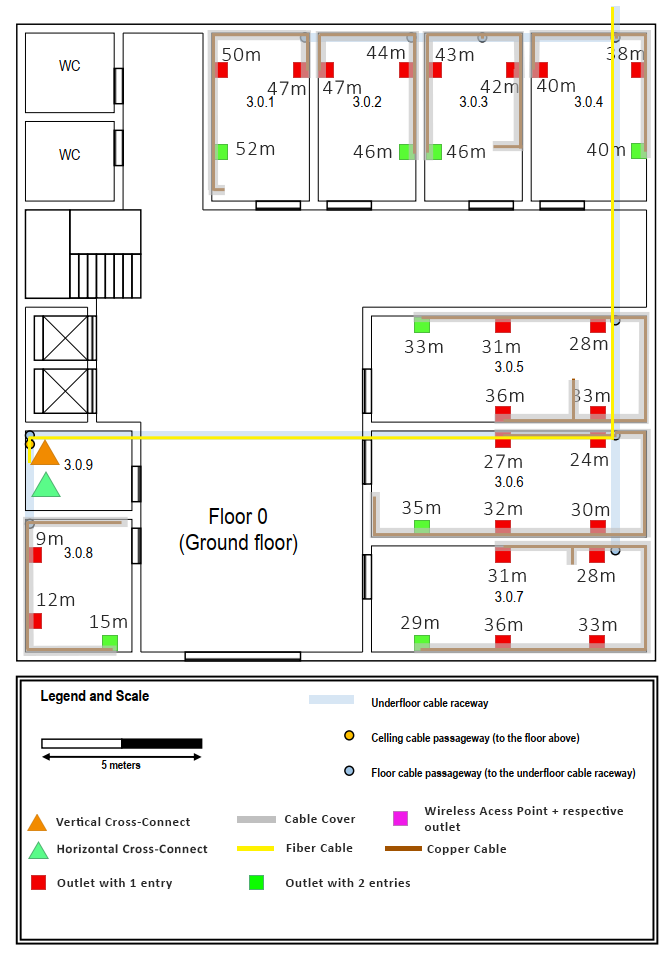
<style>
.page{position:relative;width:669px;height:956px;background:#ffffff}
.page>*{position:absolute;margin:0}
.t1{font:21.3px "Calibri-Light";letter-spacing:0.04em;color:#282828}
.t2{font:13.3px "Calibri-Bold";letter-spacing:0.04em;color:#282828}
.t3{font:13.1px "Calibri-Bold";letter-spacing:0.04em;color:#282828}
</style>
<div class="page">
<p class="t1" style="left:222px;top:48px;width:38px;height:13px">50m</p>
<p class="t1" style="left:366px;top:46px;width:39px;height:13px">44m</p>
<p class="t1" style="left:435px;top:48px;width:39px;height:13px">43m</p>
<p class="t1" style="left:606px;top:47px;width:39px;height:13px">38m</p>
<p class="t1" style="left:267px;top:81px;width:39px;height:15px">47m</p>
<p class="t1" style="left:323px;top:80px;width:38px;height:15px">47m</p>
<p class="t1" style="left:480px;top:80px;width:39px;height:13px">42m</p>
<p class="t1" style="left:537px;top:79px;width:38px;height:13px">40m</p>
<p class="t1" style="left:236px;top:142px;width:39px;height:13px">52m</p>
<p class="t1" style="left:353px;top:145px;width:39px;height:13px">46m</p>
<p class="t1" style="left:446px;top:145px;width:39px;height:13px">46m</p>
<p class="t1" style="left:587px;top:143px;width:38px;height:13px">40m</p>
<p class="t1" style="left:405px;top:340px;width:38px;height:13px">33m</p>
<p class="t1" style="left:482px;top:340px;width:38px;height:13px">31m</p>
<p class="t1" style="left:569px;top:337px;width:39px;height:13px">28m</p>
<p class="t1" style="left:486px;top:389px;width:38px;height:13px">36m</p>
<p class="t1" style="left:572px;top:389px;width:38px;height:13px">33m</p>
<p class="t1" style="left:484px;top:454px;width:38px;height:15px">27m</p>
<p class="t1" style="left:570px;top:453px;width:38px;height:13px">24m</p>
<p class="t1" style="left:402px;top:501px;width:39px;height:13px">35m</p>
<p class="t1" style="left:484px;top:502px;width:38px;height:13px">32m</p>
<p class="t1" style="left:571px;top:503px;width:39px;height:13px">30m</p>
<p class="t1" style="left:36px;top:532px;width:27px;height:13px">9m</p>
<p class="t1" style="left:488px;top:569px;width:38px;height:13px">31m</p>
<p class="t1" style="left:577px;top:569px;width:38px;height:13px">28m</p>
<p class="t1" style="left:37px;top:593px;width:38px;height:13px">12m</p>
<p class="t1" style="left:90px;top:615px;width:37px;height:13px">15m</p>
<p class="t1" style="left:401px;top:616px;width:38px;height:13px">29m</p>
<p class="t1" style="left:484px;top:618px;width:39px;height:13px">36m</p>
<p class="t1" style="left:579px;top:618px;width:38px;height:13px">33m</p>
<p class="t2" style="left:424px;top:806px;width:200px;height:25px">Wireless Acess Point + respective <br>outlet</p>
<p class="t2" style="left:56px;top:817px;width:134px;height:9px">Vertical Cross-Connect</p>
<p class="t2" style="left:284px;top:814px;width:72px;height:9px">Cable Cover</p>
<p class="t3" style="left:57px;top:844px;width:151px;height:10px">Horizontal Cross-Connect</p>
<p class="t2" style="left:286px;top:843px;width:67px;height:9px">Fiber Cable</p>
<p class="t2" style="left:427px;top:844px;width:80px;height:11px">Copper Cable</p>
<p class="t2" style="left:57px;top:878px;width:115px;height:11px">Outlet with 1 entry</p>
<p class="t2" style="left:285px;top:878px;width:125px;height:9px">Outlet with 2 entries</p>
</div>
